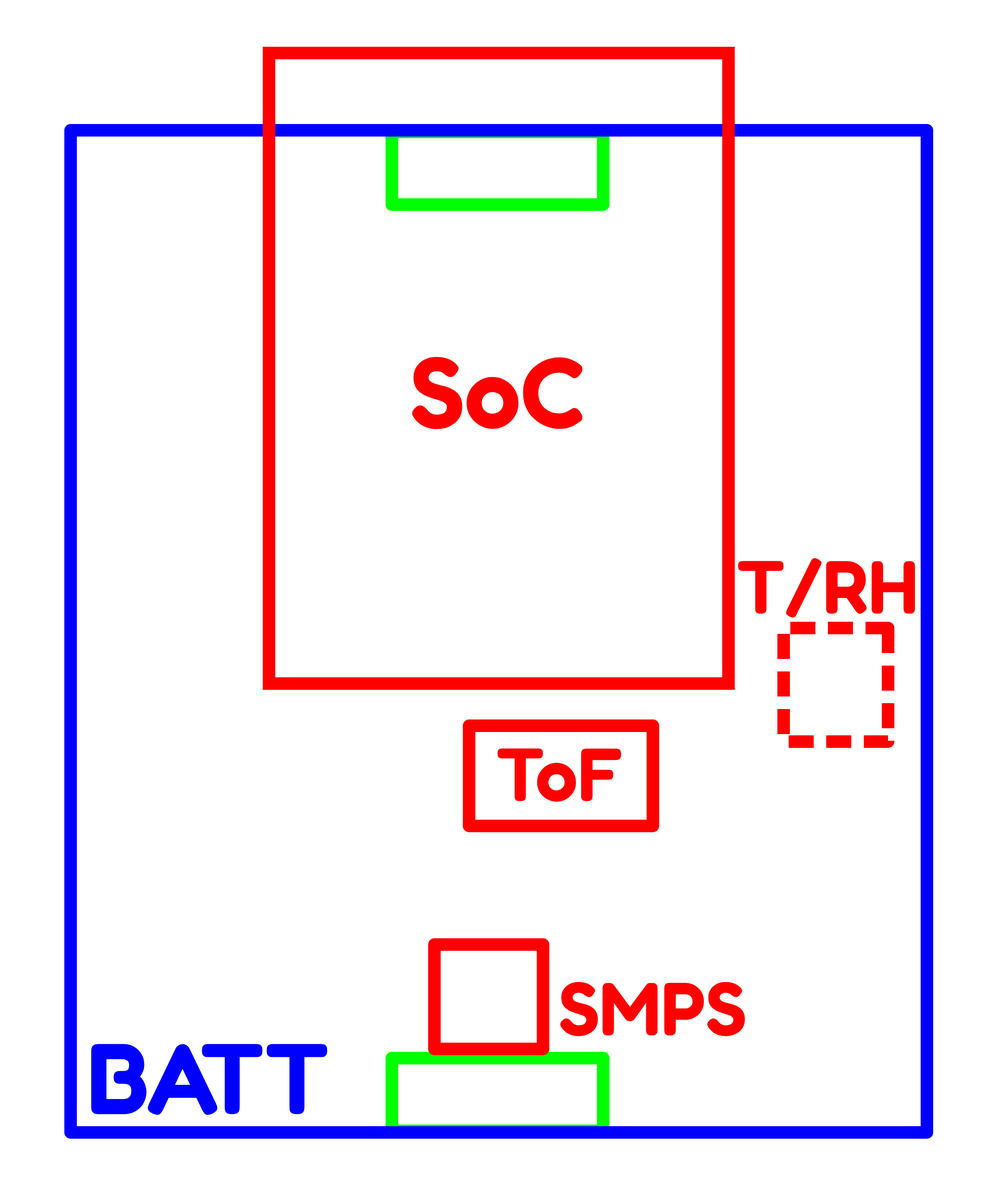
<style>
.page{position:relative;width:995px;height:1198px;background:#ffffff}
.page>*{position:absolute;margin:0}
.t1{font:100.3px "Fredoka-SemiBold";color:#ff0000}
.t2{font:75.2px "Fredoka-SemiBold";color:#ff0000}
.t3{font:100.3px "Fredoka-SemiBold";color:#0000ff}
</style>
<div class="page">
<p class="t1" style="left:412px;top:357px;width:171px;height:72px">SoC</p>
<p class="t2" style="left:738px;top:558px;width:177px;height:60px">T/RH</p>
<p class="t2" style="left:497px;top:749px;width:124px;height:53px">ToF</p>
<p class="t2" style="left:560px;top:982px;width:185px;height:55px">SMPS</p>
<p class="t3" style="left:91px;top:1044px;width:236px;height:72px">BATT</p>
</div>
